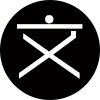
<style>
.page{position:relative;width:100px;height:100px;background:#030000}
.page>*{position:absolute;margin:0}
.t1{font:75px "BigruiqiaoGB1.0";color:#ffffff}
</style>
<div class="page">
<p class="t1" style="left:17px;top:15px;width:66px;height:64px">文</p>
</div>
